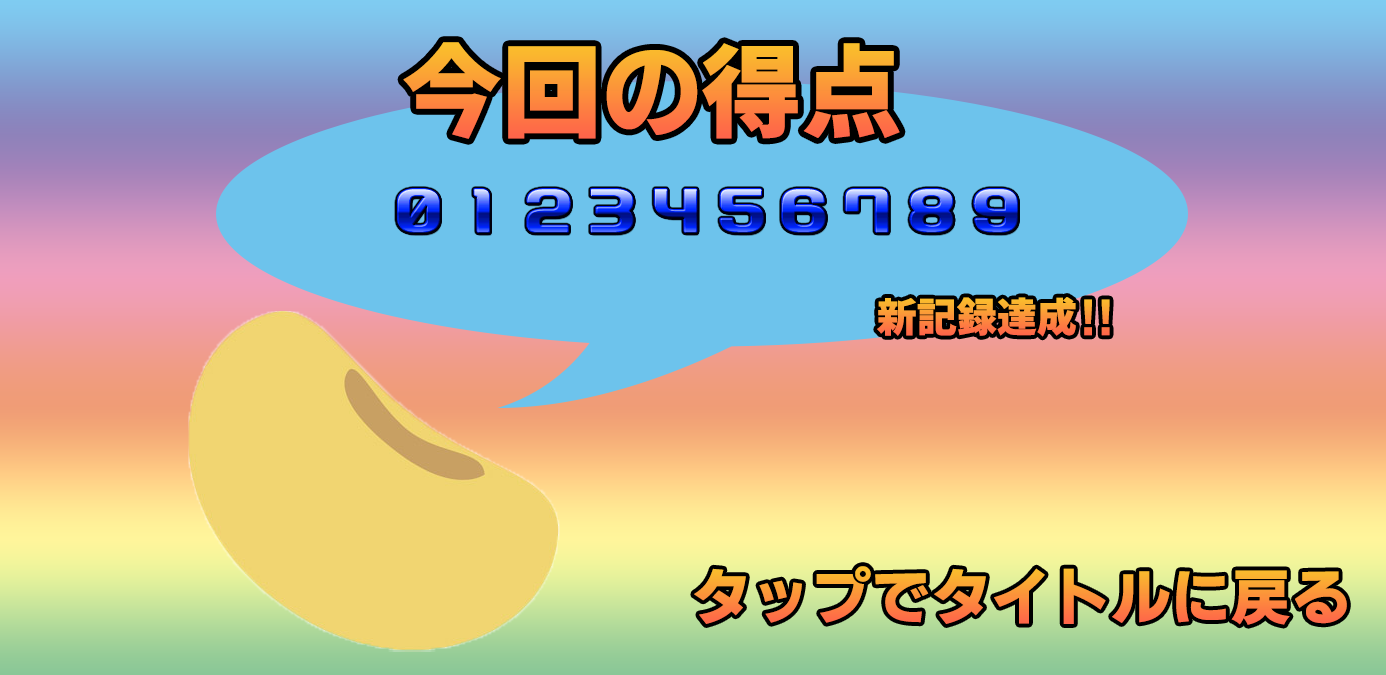
<style>
.page{position:relative;width:1386px;height:675px}
.page>*{position:absolute;margin:0}
.t1{font:100px "GenEiNuGothic-EB"}
.t2{font:40px "GenEiNuGothic-EB"}
.t3{font:60px "GenEiNuGothic-EB"}
</style>
<div class="page">
<p class="t1" style="left:403px;top:42px;width:497px;height:97px">今回の得点</p>
<p class="t2" style="left:877px;top:297px;width:233px;height:40px">新記録達成！！</p>
<p class="t3" style="left:694px;top:566px;width:653px;height:59px">タップでタイトルに戻る</p>
</div>
